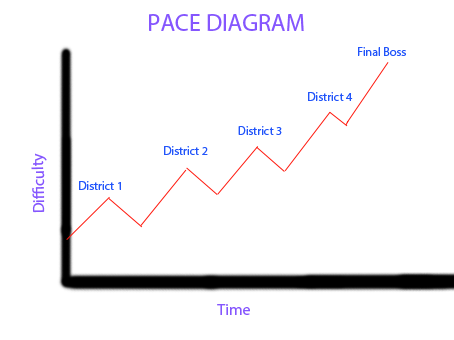
<style>
.page{position:relative;width:454px;height:340px;background:#ffffff}
.page>*{position:absolute;margin:0}
.t1{font:24px "MyriadPro-Regular";color:#8556fe}
.t2{font:12px "MyriadPro-Regular";color:#2154fa}
.t3{font:16px "MyriadPro-Regular";color:#8556fe}
</style>
<div class="page">
<p class="t1" style="left:149px;top:14px;width:155px;height:17px">PACE DIAGRAM</p>
<p class="t2" style="left:358px;top:47px;width:48px;height:9px">Final Boss</p>
<p class="t2" style="left:308px;top:92px;width:45px;height:9px">District 4</p>
<p class="t2" style="left:238px;top:126px;width:44px;height:9px">District 3</p>
<p class="t2" style="left:164px;top:146px;width:44px;height:9px">District 2</p>
<p class="t3" style="left:31px;top:153px;width:16px;height:60px;rotate:-91deg">Difficulty</p>
<p class="t2" style="left:79px;top:181px;width:42px;height:9px">District 1</p>
<p class="t3" style="left:217px;top:304px;width:33px;height:11px">Time</p>
</div>
